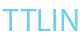
<style>
.page{position:relative;width:83px;height:39px;background:#ffffff}
.page>*{position:absolute;margin:0}
.t1{font:31.9px "MyriadPro-Regular";color:#6dcff6}
</style>
<div class="page">
<p class="t1" style="left:2px;top:9px;width:76px;height:22px">TTLIN</p>
</div>
